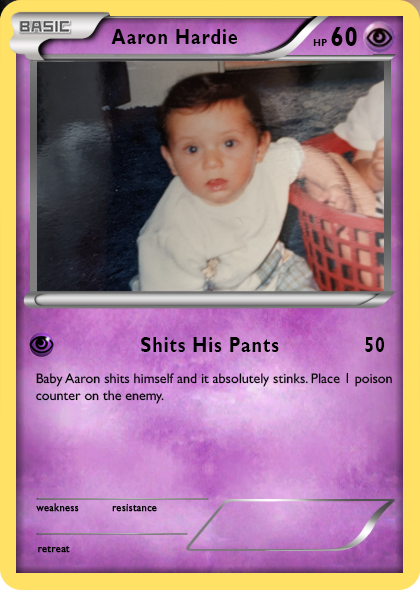
<style>
.page{position:relative;width:420px;height:590px}
.page>*{position:absolute;margin:0}
.t1{font:21.3px "GillSansMT-Bold";letter-spacing:0.04em;color:#000000;scale:0.87 1}
.t2{font:27.6px "GillSansMT-Bold";letter-spacing:0.04em;color:#000000;scale:0.87 1}
.t3{font:10.5px "GillSansMT-Bold";letter-spacing:0.04em;color:#000000;scale:0.87 1}
.t4{font:14px "GillSansMT";color:#000000}
.t5{font:14px "GillSans";color:#000000}
</style>
<div class="page">
<p class="t1" style="left:111px;top:29px;width:127px;height:15px">Aaron Hardie</p>
<p class="t2" style="left:331px;top:27px;width:26px;height:19px">60</p>
<p class="t3" style="left:313px;top:39px;width:14px;height:7px">HP</p>
<p class="t1" style="left:141px;top:337px;width:138px;height:15px">Shits His Pants</p>
<p class="t1" style="left:365px;top:337px;width:20px;height:15px">50</p>
<p class="t4" style="left:36px;top:373px;width:356px;height:31px">Baby Aaron shits himself and it absolutely stinks. Place <span class="t5">1</span> poison<br>counter on the enemy.</p>
</div>
